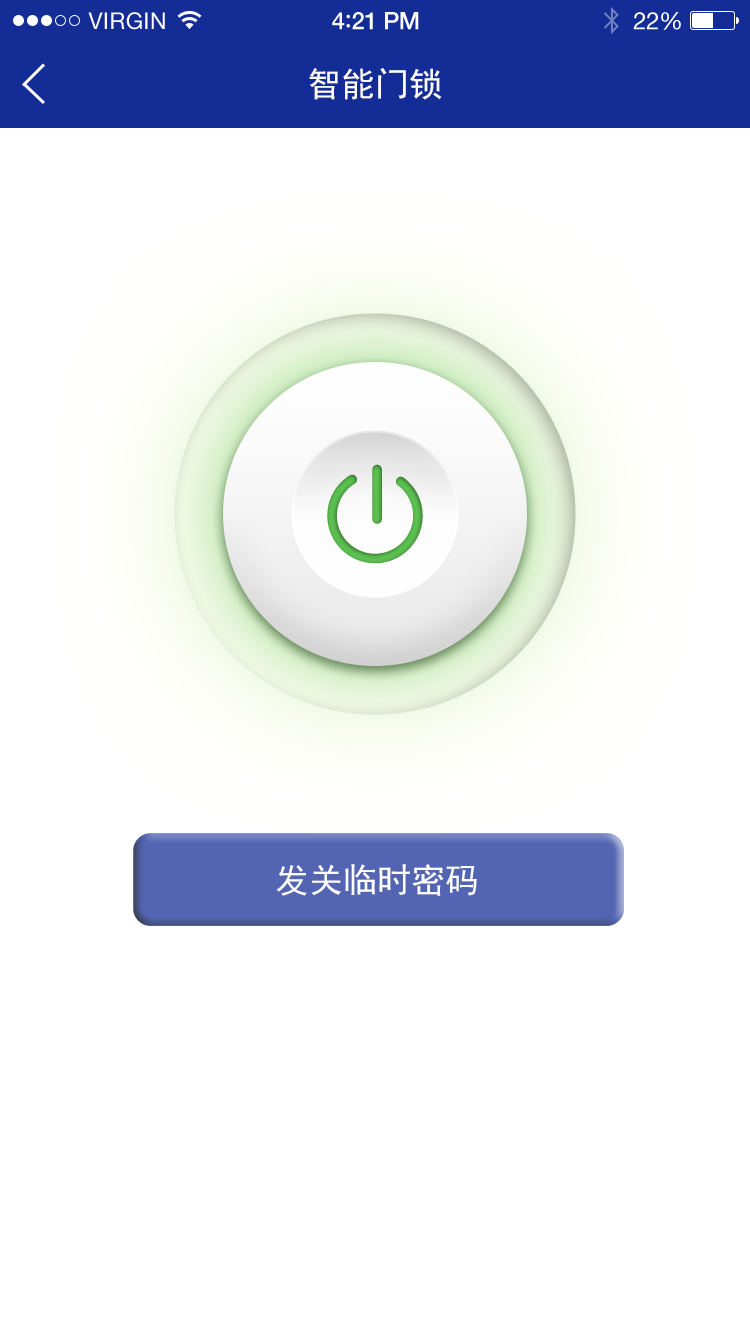
<style>
.page{position:relative;width:750px;height:1334px;background:#ffffff}
.page>*{position:absolute;margin:0}
.t1{font:34px "SimHei";color:#fefefe}
</style>
<div class="page">
<p class="t1" style="left:309px;top:68px;width:133px;height:32px">智能门锁</p>
<p class="t1" style="left:276px;top:864px;width:201px;height:32px">发关临时密码</p>
</div>
